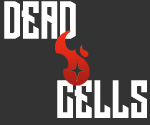
<style>
.page{position:relative;width:150px;height:125px;background:#333333}
.page>*{position:absolute;margin:0}
.t1{font:48px "LongShot";color:#ffffff}
.t2{font:48px "LongShot";color:#fffefe}
</style>
<div class="page">
<p class="t1" style="left:4px;top:1px;width:72px;height:38px">DEAD</p>
<p class="t2" style="left:57px;top:80px;width:90px;height:38px">CELLS</p>
</div>
